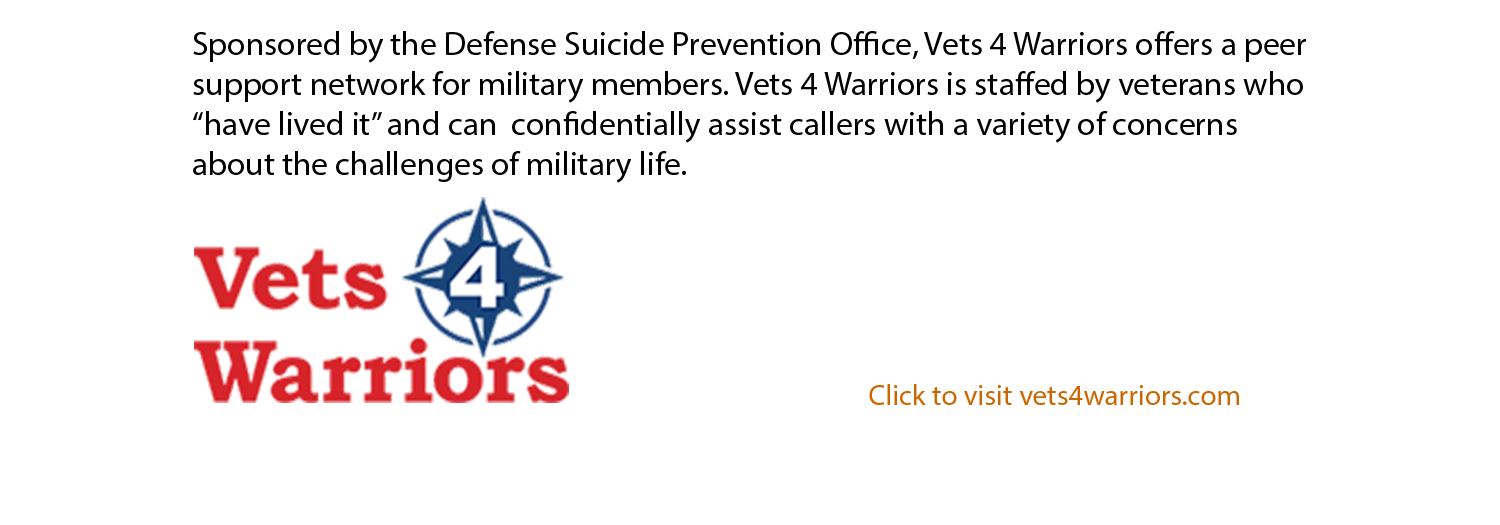
<style>
.page{position:relative;width:1500px;height:525px;background:#ffffff}
.page>*{position:absolute;margin:0}
.t1{font:33.3px "MyriadPro-Regular";color:#000000}
.t2{font:29.2px "MyriadPro-Regular";color:#cc6600}
</style>
<div class="page">
<p class="t1" style="left:193px;top:31px;width:1113px;height:152px">Sponsored by the Defense Suicide Prevention Office, Vets 4 Warriors offers a peer support network for military members. Vets 4 Warriors is staffed by veterans who “have lived it” and can  confidentially assist callers with a variety of concerns about the challenges of military life.</p>
<p class="t2" style="left:869px;top:384px;width:370px;height:21px">Click to visit vets4warriors.com</p>
</div>
